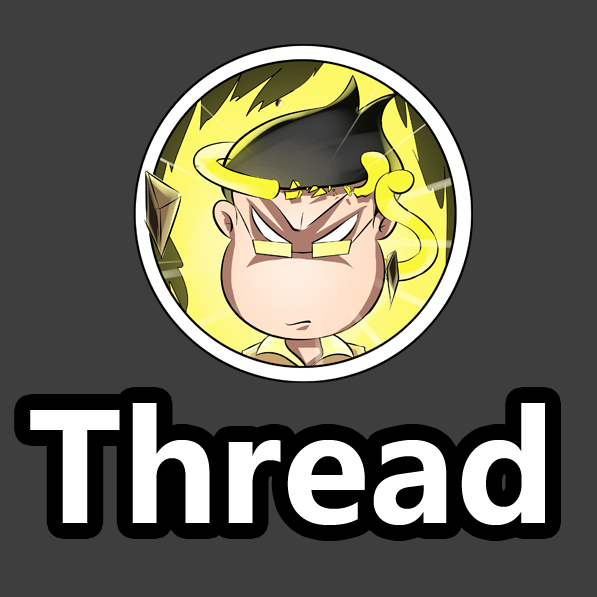
<style>
.page{position:relative;width:597px;height:597px;background:#3e3e3e}
.page>*{position:absolute;margin:0}
.t1{font:149.8px "MicrosoftYaHei-Bold";color:#ffffff}
</style>
<div class="page">
<p class="t1" style="left:30px;top:403px;width:515px;height:122px">Thread</p>
</div>
